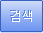
<style>
.page{position:relative;width:43px;height:33px}
.page>*{position:absolute;margin:0}
.t1{font:12px "Gulim";color:#5b82de}
.t2{font:12px "Gulim";color:#ffffff}
</style>
<div class="page">
<p class="t1" style="left:10px;top:10px;width:21px;height:11px">검색</p>
<p class="t2" style="left:11px;top:11px;width:21px;height:11px">검색</p>
</div>
